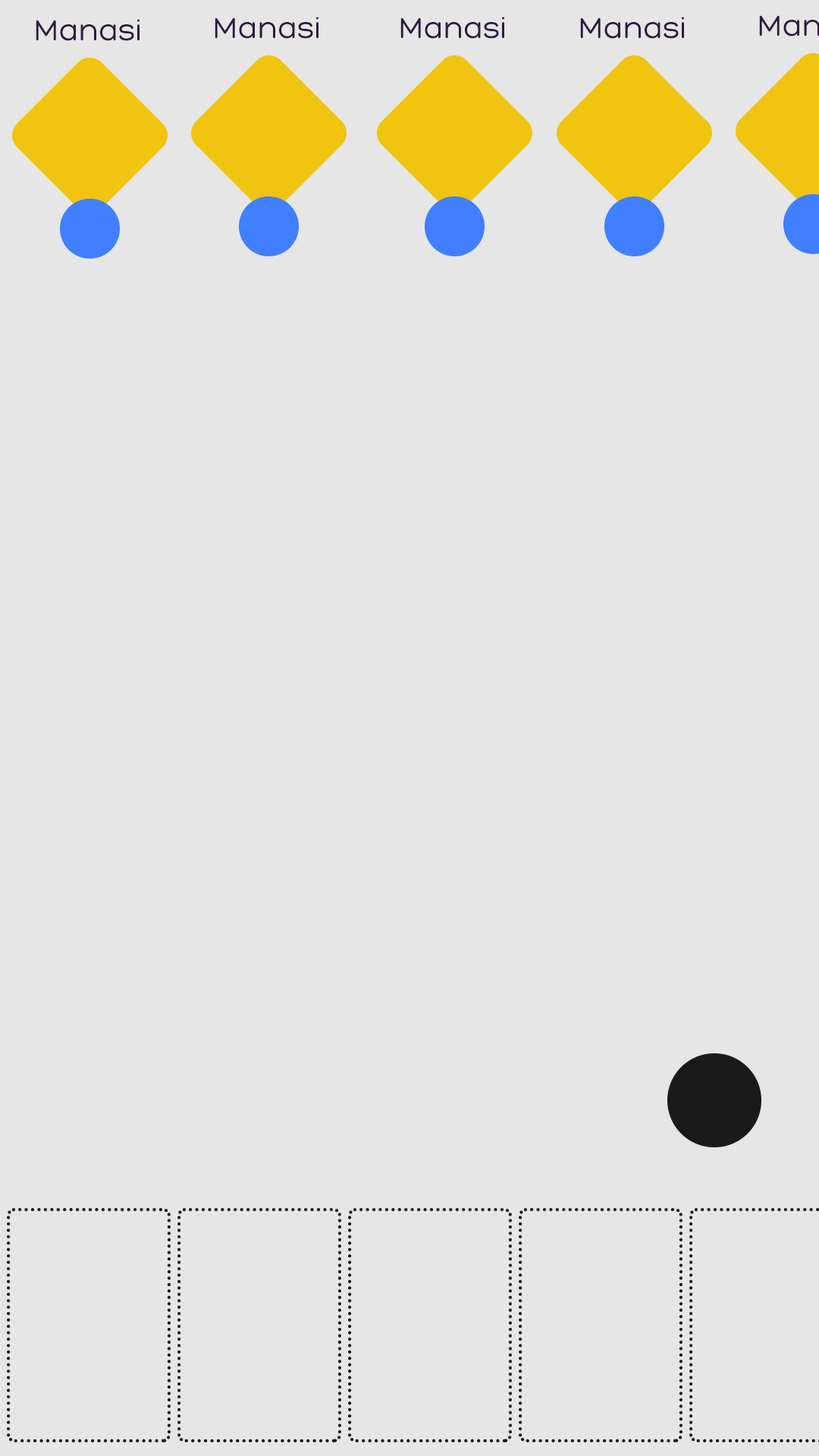
<style>
.page{position:relative;width:819px;height:1456px;background:#e6e6e6}
.page>*{position:absolute;margin:0}
.t1{font:31.6px "Hero-Regular";color:#2f1940}
</style>
<div class="page">
<p class="t1" style="left:215px;top:17px;width:103px;height:22px">Manasi</p>
<p class="t1" style="left:400px;top:17px;width:104px;height:22px">Manasi</p>
<p class="t1" style="left:580px;top:17px;width:104px;height:22px">Manasi</p>
<p class="t1" style="left:36px;top:19px;width:104px;height:22px">Manasi</p>
</div>
